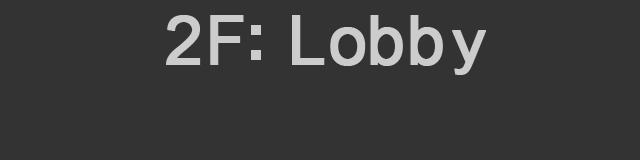
<style>
.page{position:relative;width:640px;height:160px;background:#333333}
.page>*{position:absolute;margin:0}
.t1{font:68px "ArialMT";letter-spacing:0.01em;color:#cccccc;font-weight:bold}
.t2{font:68px "ArialMT";letter-spacing:0.05em;color:#cccccc;font-weight:bold;scale:0.95 1}
.t3{font:68px "ArialMT";letter-spacing:0.03em;color:#cccccc;font-weight:bold}
.t4{font:68px "ArialMT";letter-spacing:-0.03em;color:#cccccc;font-weight:bold}
.t5{font:68px "ArialMT";letter-spacing:0.07em;color:#cccccc;font-weight:bold}
.t6{font:61.2px "ArialMT";letter-spacing:0.05em;color:#cccccc;font-weight:bold;scale:1.11 1}
</style>
<div class="page">
<p class="t1" style="left:166px;top:15px;width:320px;height:60px">2<span class="t2">F  </span><span class="t3">L</span><span class="t4">o</span>b<span class="t5">b</span><span class="t6">y</span></p>
</div>
